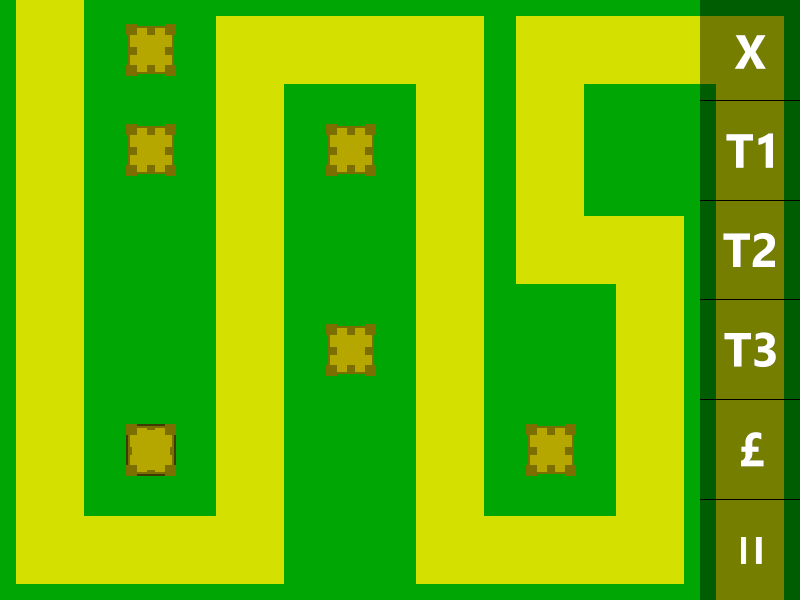
<style>
.page{position:relative;width:800px;height:600px;background:#d3e000}
.page>*{position:absolute;margin:0}
.t1{font:48px "SegoeUI-Bold";color:#ffffff}
</style>
<div class="page">
<p class="t1" style="left:734px;top:35px;width:32px;height:34px">X</p>
<p class="t1" style="left:726px;top:133px;width:47px;height:35px">T1</p>
<p class="t1" style="left:723px;top:233px;width:52px;height:34px">T2</p>
<p class="t1" style="left:724px;top:332px;width:52px;height:35px">T3</p>
<p class="t1" style="left:741px;top:432px;width:23px;height:35px">£</p>
</div>
